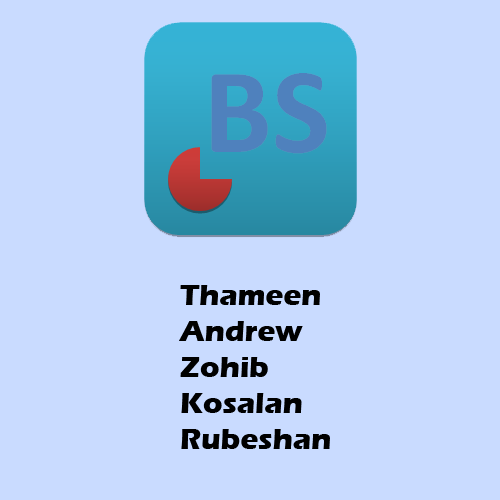
<style>
.page{position:relative;width:500px;height:500px;background:#c9dbff}
.page>*{position:absolute;margin:0}
.t1{font:30px "ErasITC-Bold";color:#000000}
</style>
<div class="page">
<p class="t1" style="left:179px;top:285px;width:151px;height:164px">Thameen<br>Andrew<br>Zohib<br>Kosalan<br>Rubeshan</p>
</div>
